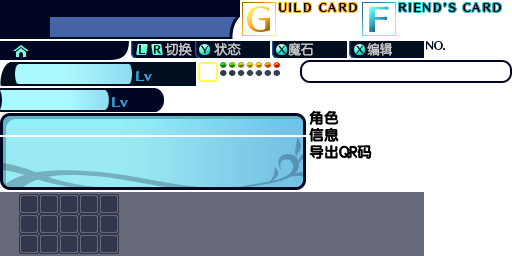
<style>
.page{position:relative;width:512px;height:256px;background:#ffffff}
.page>*{position:absolute;margin:0}
.t1{font:13.3px "FZY3--GB1-4";color:#cfcfcf}
.t2{font:13.3px "FZY3--GB1-4";color:#cfcfcf;scale:0.94 1}
.t3{font:14.7px/17.3px "FZY4K--GBK1-0";color:#000000}
</style>
<div class="page">
<p class="t1" style="left:165px;top:42px;width:27px;height:14px">切换</p>
<p class="t1" style="left:214px;top:42px;width:27px;height:14px">状态</p>
<p class="t2" style="left:288px;top:42px;width:26px;height:14px">魔石</p>
<p class="t2" style="left:367px;top:42px;width:26px;height:14px">编辑</p>
<p class="t3" style="left:309px;top:110px;width:63px;height:49px">角色<br>信息<br>导出QR码</p>
</div>
